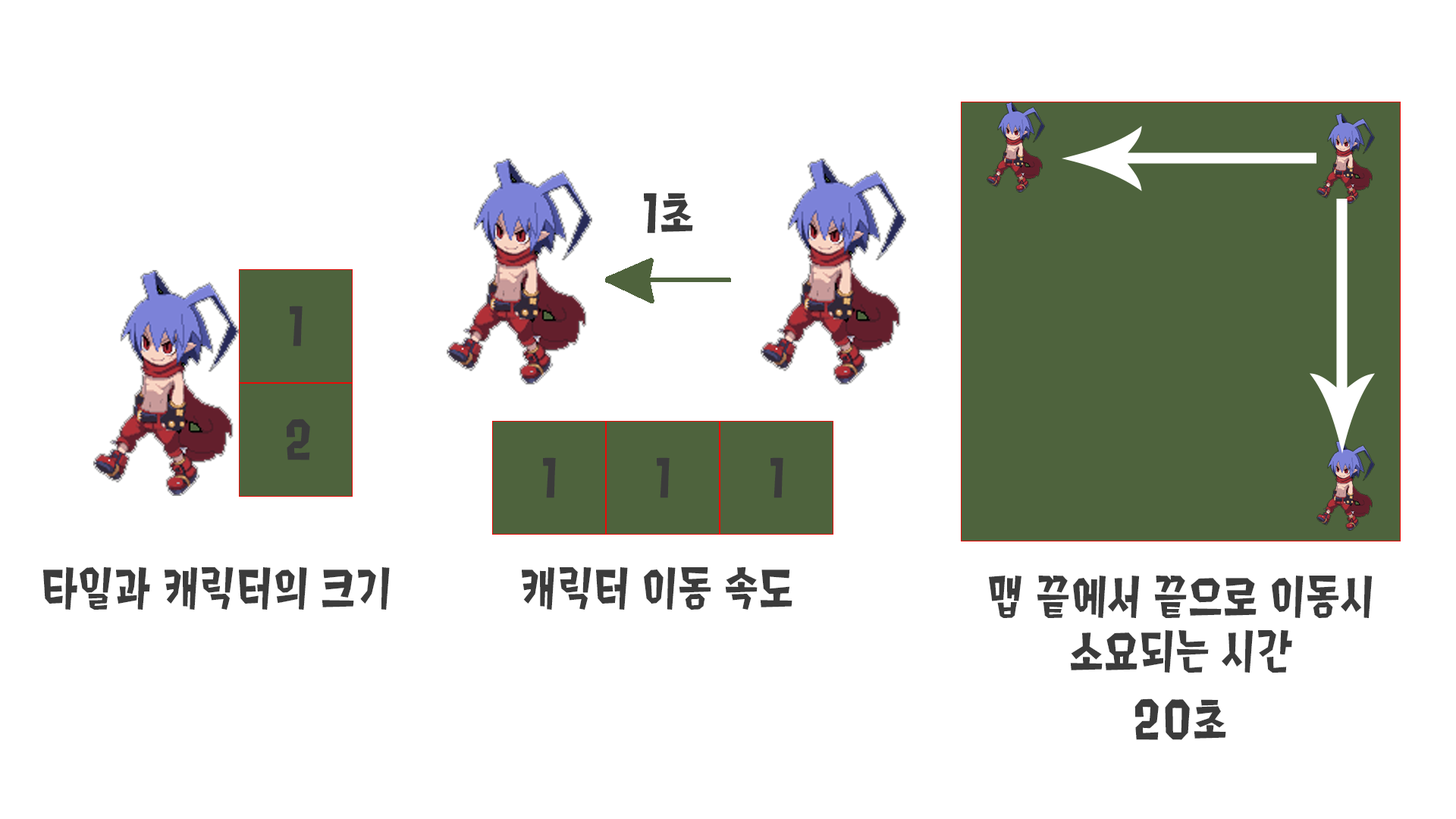
<style>
.page{position:relative;width:1456px;height:819px;background:#ffffff}
.page>*{position:absolute;margin:0}
.t1{font:54.6px "Splat2K";letter-spacing:0.01em;color:#3b3b3b}
.t2{font:54.6px/54.6px "Splat2K";letter-spacing:0.01em;color:#3b3b3b}
</style>
<div class="page">
<p class="t1" style="left:644px;top:193px;width:49px;height:41px">1초</p>
<p class="t1" style="left:290px;top:306px;width:13px;height:41px">1</p>
<p class="t1" style="left:286px;top:419px;width:24px;height:41px">2</p>
<p class="t1" style="left:543px;top:457px;width:13px;height:41px">1</p>
<p class="t1" style="left:657px;top:457px;width:13px;height:41px">1</p>
<p class="t1" style="left:770px;top:457px;width:13px;height:41px">1</p>
<p class="t1" style="left:43px;top:567px;width:347px;height:43px">타일과 캐릭터의 크기</p>
<p class="t1" style="left:522px;top:567px;width:270px;height:43px">캐릭터 이동 속도</p>
<p class="t2" style="left:989px;top:576px;width:384px;height:97px;text-align:center">맵 끝에서 끝으로 이동시<br>소요되는 시간</p>
<p class="t1" style="left:1134px;top:698px;width:92px;height:42px">20초</p>
</div>
